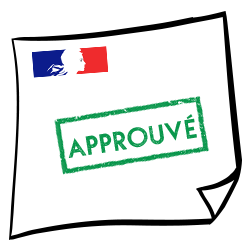
<style>
.page{position:relative;width:250px;height:250px;background:#ffffff}
.page>*{position:absolute;margin:0}
.t1{font:30px "NOVASTAMP-Bold";letter-spacing:0.05em;color:#0a974c;text-transform:uppercase}
</style>
<div class="page">
<p class="t1" style="left:68px;top:114px;width:129px;height:44px;rotate:-9deg">approuvé</p>
</div>
